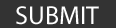
<style>
.page{position:relative;width:116px;height:28px;background:#333333}
.page>*{position:absolute;margin:0}
.t1{font:26px "MyriadPro-Regular";color:#ffffff;text-transform:uppercase}
.t2{font:30px "MyriadPro-Bold";color:#ffffff;text-transform:uppercase}
</style>
<div class="page">
<p class="t1" style="left:16px;top:6px;width:83px;height:19px"><span class="t2">   </span>SUBMIT</p>
</div>
